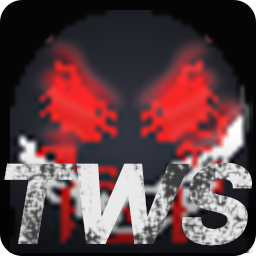
<style>
.page{position:relative;width:256px;height:256px}
.page>*{position:absolute;margin:0}
.t1{font:110px "InterTight-ExtraBoldItalic"}
</style>
<div class="page">
<p class="t1" style="left:4px;top:162px;width:248px;height:84px">TWS</p>
</div>
